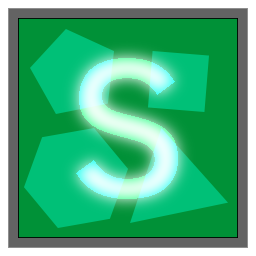
<style>
.page{position:relative;width:256px;height:256px;background:#009137}
.page>*{position:absolute;margin:0}
.t1{font:200px "ClearSans-Medium"}
</style>
<div class="page">
<p class="t1" style="left:76px;top:58px;width:102px;height:141px">S</p>
</div>
